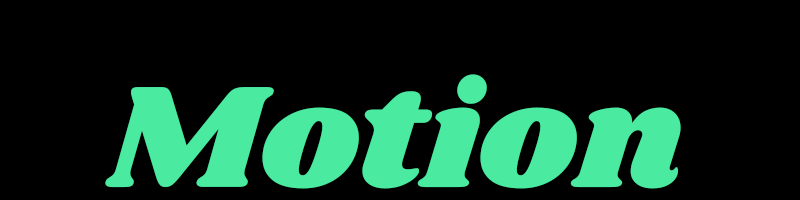
<style>
.page{position:relative;width:800px;height:200px;background:#000000}
.page>*{position:absolute;margin:0}
.t1{font:150px "Shrikhand-Regular";color:#4aeba1}
</style>
<div class="page">
<p class="t1" style="left:105px;top:74px;width:576px;height:115px">Motion</p>
</div>
